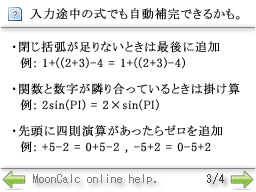
<style>
.page{position:relative;width:256px;height:192px;background:#ffffff}
.page>*{position:absolute;margin:0}
.t1{font:9px "Small Fonts";letter-spacing:0.05em;color:#a27272;font-weight:bold}
.t2{font:12px "MS-PMincho";letter-spacing:0.05em;color:#000000;font-weight:bold}
.t3{font:12px/16px "MS-PMincho";letter-spacing:0.05em;color:#000000;font-weight:bold}
.t4{font:12px/10px "MS-PMincho";letter-spacing:0.05em;color:#000000;font-weight:bold}
.t5{font:14px "Terminal";color:#7f7f7f}
.t6{font:14px "Terminal";color:#404040}
</style>
<div class="page">
<p class="t1" style="left:13px;top:11px;width:5px;height:8px">?</p>
<p class="t2" style="left:30px;top:8px;width:210px;height:12px">入力途中の式でも自動補完できるかも。</p>
<p class="t3" style="left:13px;top:41px;width:227px;height:112px">・閉じ括弧が足りないときは最後に追加<br>  例: 1+((2+3)-4 = 1+((2+3)-4)<br><span class="t4"><br>・</span>関数と数字が隣り合っているときは掛け算<br>  例: 2sin(PI) = 2×sin(PI)<br><span class="t4"><br>・</span>先頭に四則演算があったらゼロを追加<br>  例: +5-2 = 0+5-2 , -5+2 = 0-5+2</p>
<p class="t5" style="left:33px;top:174px;width:123px;height:10px">MoonCalc online help.</p>
<p class="t6" style="left:207px;top:173px;width:17px;height:11px">3/4</p>
</div>
